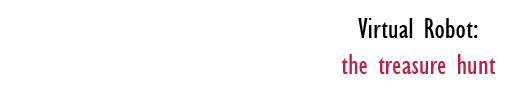
<style>
.page{position:relative;width:510px;height:95px;background:#ffffff}
.page>*{position:absolute;margin:0}
.t1{font:30px "GillSansMT-Condensed";color:#bf1f41}
.t2{font:30px "GillSansMT-Condensed";color:#000000}
</style>
<div class="page">
<p class="t1" style="left:341px;top:18px;width:154px;height:56px"><span class="t2">  Virtual Robot: <br></span>the treasure hunt</p>
</div>
